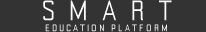
<style>
.page{position:relative;width:206px;height:32px;background:#333333}
.page>*{position:absolute;margin:0}
.t1{font:30px "YearlingLite";letter-spacing:0.075em;color:#ffffff;text-transform:uppercase;font-weight:bold}
.t2{font:10px "YearlingLite";letter-spacing:0.2em;color:#ffffff;text-transform:uppercase;font-weight:bold}
</style>
<div class="page">
<p class="t1" style="left:43px;top:0px;width:129px;height:21px">S M A R T</p>
<p class="t2" style="left:45px;top:24px;width:122px;height:8px">Education Platform</p>
</div>
